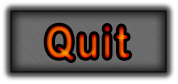
<style>
.page{position:relative;width:178px;height:84px}
.page>*{position:absolute;margin:0}
.t1{font:43.2px "ArialRoundedMTBold";letter-spacing:0.1em;scale:0.83 1}
</style>
<div class="page">
<p class="t1" style="left:46px;top:25px;width:84px;height:35px">Quit</p>
</div>
